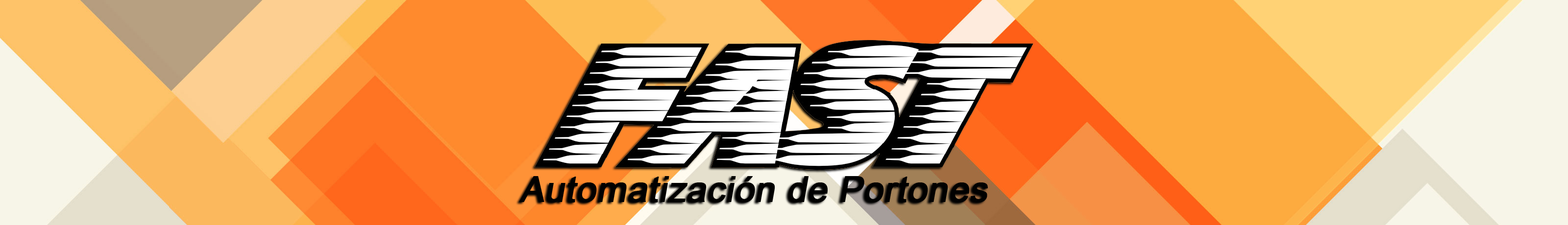
<style>
.page{position:relative;width:1568px;height:225px}
.page>*{position:absolute;margin:0}
.t1{font:35.3px "ArialMT";color:#010101;font-weight:bold;font-style:italic}
</style>
<div class="page">
<p class="t1" style="left:519px;top:176px;width:469px;height:27px">Automatización de Portones</p>
</div>
